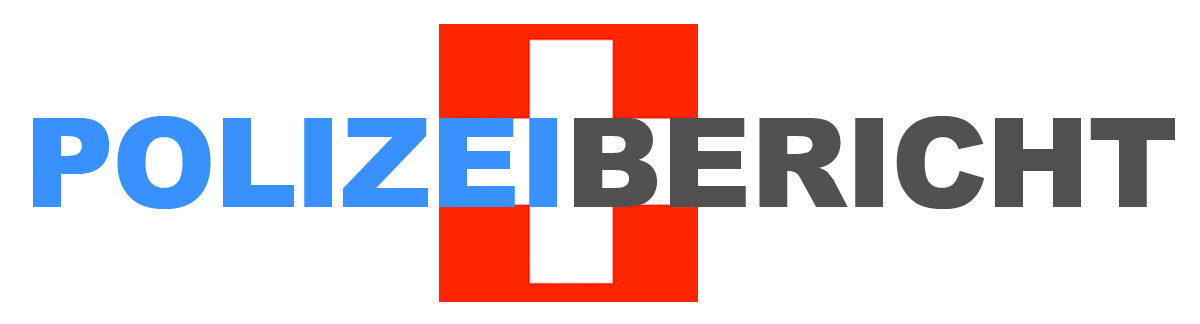
<style>
.page{position:relative;width:1200px;height:324px;background:#ffffff}
.page>*{position:absolute;margin:0}
.t1{font:125px "Arial-Black";color:#3891ff}
.t2{font:125px "Arial-Black";color:#515151}
</style>
<div class="page">
<p class="t1" style="left:33px;top:116px;width:1142px;height:93px">POLIZEI<span class="t2">BERICHT</span></p>
</div>
